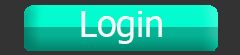
<style>
.page{position:relative;width:240px;height:55px;background:#333333}
.page>*{position:absolute;margin:0}
.t1{font:36px "Tahoma";color:#f3f9f8}
</style>
<div class="page">
<p class="t1" style="left:81px;top:11px;width:81px;height:33px">Login</p>
</div>
